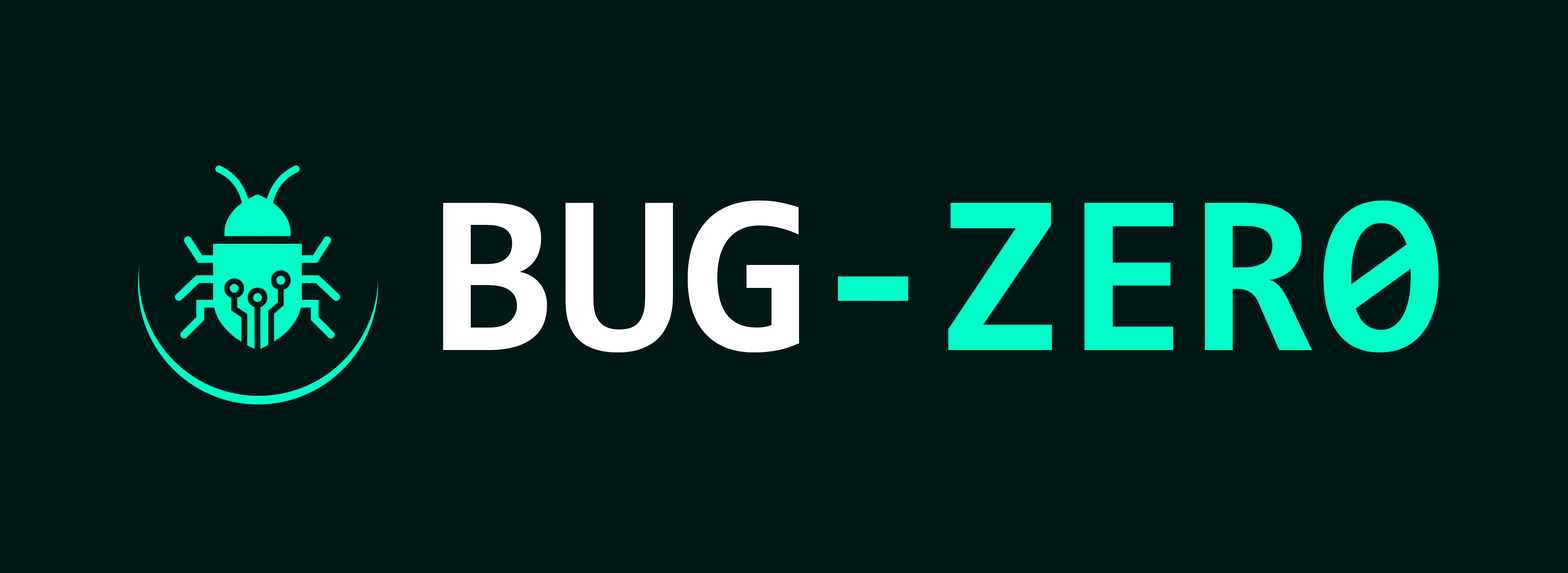
<style>
.page{position:relative;width:1568px;height:573px;background:#011715}
.page>*{position:absolute;margin:0}
.t1{font:231px "Consolas-Bold";color:#00ffc8}
.t2{font:231px "Consolas-Bold";color:#ffffff}
</style>
<div class="page">
<p class="t1" style="left:443px;top:200px;width:996px;height:153px"><span class="t2">BUG</span>-ZER0</p>
</div>
